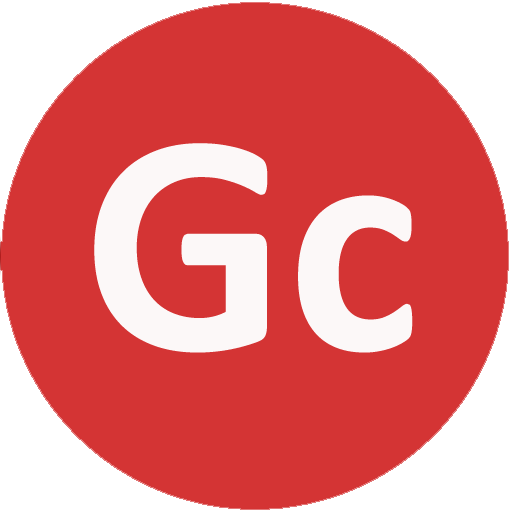
<style>
.page{position:relative;width:512px;height:512px;background:#d43434}
.page>*{position:absolute;margin:0}
.t1{font:320px "Calibri-Bold";color:#fcf8f8}
</style>
<div class="page">
<p class="t1" style="left:94px;top:143px;width:319px;height:210px">Gc</p>
</div>
